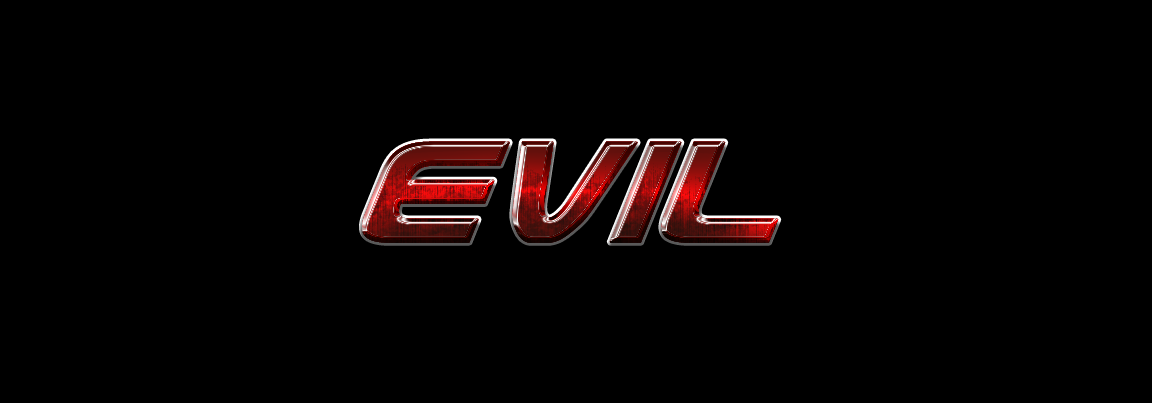
<style>
.page{position:relative;width:1152px;height:403px;background:#000000}
.page>*{position:absolute;margin:0}
.t1{font:172px "UsuziItalic";letter-spacing:-0.025em;font-weight:bold}
</style>
<div class="page">
<p class="t1" style="left:362px;top:141px;width:417px;height:102px">evil</p>
<p class="t1" style="left:362px;top:141px;width:417px;height:102px">evil</p>
<p class="t1" style="left:362px;top:141px;width:417px;height:102px">evil</p>
<p class="t1" style="left:362px;top:141px;width:417px;height:102px">evil</p>
</div>
